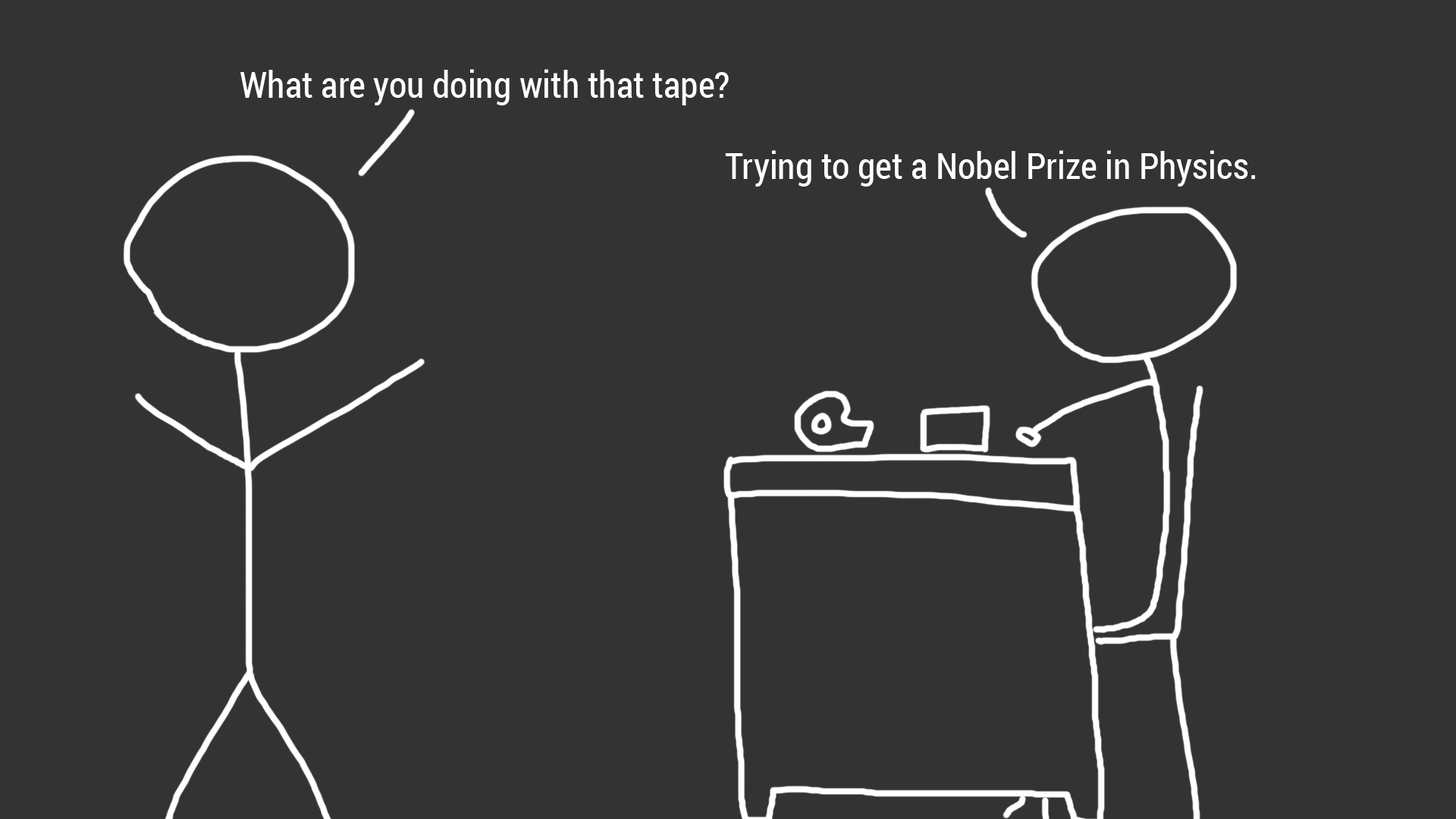
<style>
.page{position:relative;width:1456px;height:819px;background:#333333}
.page>*{position:absolute;margin:0}
.t1{font:36.4px "RobotoCondensed-Regular";color:#ffffff}
</style>
<div class="page">
<p class="t1" style="left:240px;top:69px;width:489px;height:36px">What are you doing with that tape?</p>
<p class="t1" style="left:725px;top:150px;width:530px;height:37px">Trying to get a Nobel Prize in Physics.</p>
</div>
